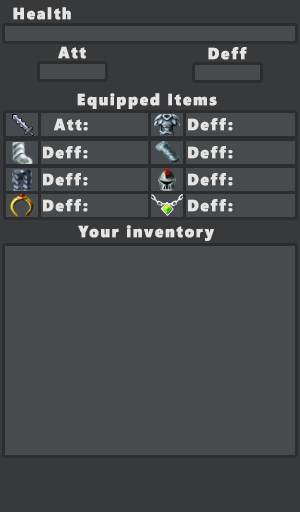
<style>
.page{position:relative;width:300px;height:512px;background:#484b4e}
.page>*{position:absolute;margin:0}
.t1{font:16.1px "SegoeWP-Black";letter-spacing:0.1em;color:#e5e4e2;font-weight:bold;scale:0.93 1}
</style>
<div class="page">
<p class="t1" style="left:13px;top:7px;width:58px;height:13px">Health</p>
<p class="t1" style="left:58px;top:46px;width:28px;height:13px">Att</p>
<p class="t1" style="left:208px;top:47px;width:39px;height:13px">Deff</p>
<p class="t1" style="left:77px;top:93px;width:140px;height:16px">Equipped Items</p>
<p class="t1" style="left:54px;top:118px;width:34px;height:13px">Att:</p>
<p class="t1" style="left:188px;top:118px;width:45px;height:13px">Deff:</p>
<p class="t1" style="left:43px;top:146px;width:45px;height:13px">Deff:</p>
<p class="t1" style="left:188px;top:146px;width:45px;height:13px">Deff:</p>
<p class="t1" style="left:43px;top:173px;width:45px;height:13px">Deff:</p>
<p class="t1" style="left:188px;top:173px;width:45px;height:13px">Deff:</p>
<p class="t1" style="left:43px;top:199px;width:45px;height:13px">Deff:</p>
<p class="t1" style="left:188px;top:199px;width:45px;height:13px">Deff:</p>
<p class="t1" style="left:78px;top:225px;width:136px;height:16px">Your inventory</p>
</div>
